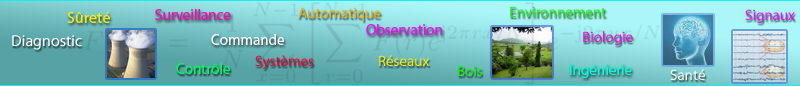
<style>
.page{position:relative;width:800px;height:86px}
.page>*{position:absolute;margin:0}
.t1{font:15px "MyriadPro-Regular";color:#19f609}
.t2{font:16px "MyriadPro-Regular";color:#f6ee09}
.t3{font:15px "MyriadPro-Regular";color:#f609b0}
.t4{font:15px "MyriadPro-Regular";color:#f6ab09}
.t5{font:15px "MyriadPro-Regular";color:#ec0bfa}
.t6{font:15px "MyriadPro-Regular";color:#f309f6}
.t7{font:16px "MyriadPro-Regular";color:#ffffff}
.t8{font:15px "MyriadPro-Regular";color:#fdfefe}
.t9{font:15px "MyriadPro-Regular";color:#f609e2}
.t10{font:15px "MyriadPro-Regular";color:#09f65c}
.t11{font:15px "MyriadPro-Regular";color:#fc0035}
.t12{font:15px "MyriadPro-Regular";color:#f6ee09}
.t13{font:15px "MyriadPro-Regular";color:#00fdd6}
.t14{font:15px "MyriadPro-Regular";color:#ffffff}
</style>
<div class="page">
<p class="t1" style="left:510px;top:6px;width:96px;height:11px">Environnement</p>
<p class="t2" style="left:67px;top:12px;width:43px;height:11px">Sûreté</p>
<p class="t3" style="left:155px;top:9px;width:76px;height:11px">Surveillance</p>
<p class="t4" style="left:298px;top:7px;width:83px;height:14px">Automatique</p>
<p class="t5" style="left:745px;top:9px;width:50px;height:14px">Signaux</p>
<p class="t6" style="left:366px;top:24px;width:76px;height:11px">Observation</p>
<p class="t7" style="left:12px;top:35px;width:70px;height:15px">Diagnostic</p>
<p class="t8" style="left:211px;top:34px;width:73px;height:11px">Commande</p>
<p class="t9" style="left:583px;top:31px;width:50px;height:14px">Biologie</p>
<p class="t10" style="left:176px;top:63px;width:54px;height:11px">Contrôle</p>
<p class="t11" style="left:255px;top:55px;width:59px;height:14px">Systèmes</p>
<p class="t12" style="left:379px;top:55px;width:51px;height:11px">Réseaux</p>
<p class="t1" style="left:458px;top:65px;width:24px;height:11px">Bois</p>
<p class="t13" style="left:570px;top:64px;width:62px;height:14px">Ingénierie</p>
<p class="t14" style="left:670px;top:69px;width:35px;height:11px">Santé</p>
</div>
